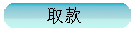
<style>
.page{position:relative;width:135px;height:32px;background:#ffffff}
.page>*{position:absolute;margin:0}
.t1{font:18px "SimSun";color:#000000}
</style>
<div class="page">
<p class="t1" style="left:47px;top:7px;width:34px;height:17px">取款</p>
</div>
